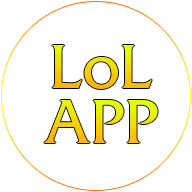
<style>
.page{position:relative;width:192px;height:192px;background:#ffffff}
.page>*{position:absolute;margin:0}
.t1{font:64.8px "FrizQuadrataStd"}
</style>
<div class="page">
<p class="t1" style="left:52px;top:45px;width:100px;height:44px">LoL</p>
<p class="t1" style="left:44px;top:100px;width:114px;height:43px">APP</p>
</div>
